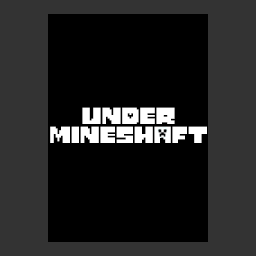
<style>
.page{position:relative;width:256px;height:256px;background:#000000}
.page>*{position:absolute;margin:0}
.t1{font:18px "MonsterFriendBack";color:#ffffff}
</style>
<div class="page">
<p class="t1" style="left:50px;top:107px;width:157px;height:36px;text-align:center">UNDEr<br><br><br><br><br><br><br><br><br><br><br><br><br>MINESHAFT</p>
</div>
